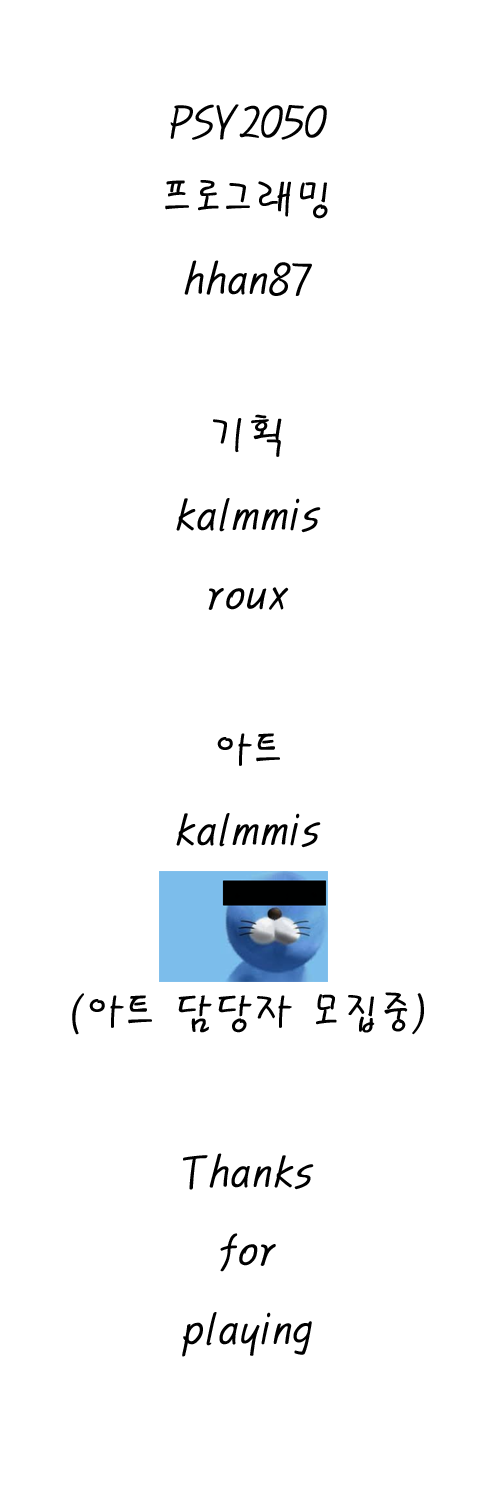
<style>
.page{position:relative;width:480px;height:1500px;background:#ffffff}
.page>*{position:absolute;margin:0}
.t1{font:45px "PyunjiR-HM";color:#000000}
</style>
<div class="page">
<p class="t1" style="left:72px;top:104px;width:352px;height:1253px;text-align:center">PSY2050<br>프로그래밍<br>hhan87<br><br>기획<br>kalmmis<br>roux<br><br>아트<br>kalmmis<br><br>(아트 담당자 모집중)<br><br>Thanks<br>for<br>playing</p>
</div>
